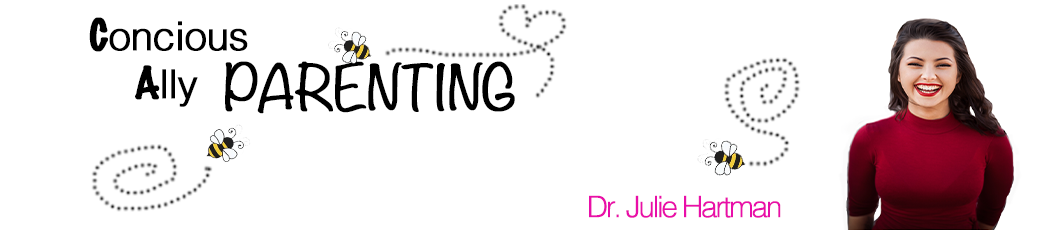
<style>
.page{position:relative;width:1050px;height:230px;background:#ffffff}
.page>*{position:absolute;margin:0}
.t1{font:40px "Helvetica-Light";letter-spacing:-0.025em;color:#000000;font-weight:bold}
.t2{font:40px "MarkerFelt-Thin";letter-spacing:-0.025em;color:#000000;font-weight:bold}
.t3{font:56.1px "Noteworthy-Light";color:#000000;font-weight:bold}
.t4{font:29.6px "Helvetica-Light";letter-spacing:-0.1em;color:#e90ea9;font-weight:bold}
</style>
<div class="page">
<p class="t1" style="left:89px;top:17px;width:159px;height:90px"><span class="t2">C</span>oncious <br><span class="t2"> A</span>lly</p>
<p class="t3" style="left:225px;top:61px;width:290px;height:53px">PARENTING</p>
<p class="t4" style="left:589px;top:195px;width:192px;height:23px">Dr. Julie Hartman</p>
</div>
